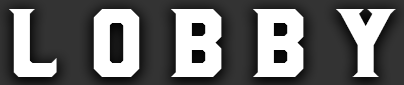
<style>
.page{position:relative;width:404px;height:85px;background:#ffffff}
.page>*{position:absolute;margin:0}
.t1{font:97px "COMPANYRegular";letter-spacing:0.3em;color:#ffffff}
</style>
<div class="page">
<p class="t1" style="left:9px;top:9px;width:387px;height:68px">LOBBY</p>
</div>
